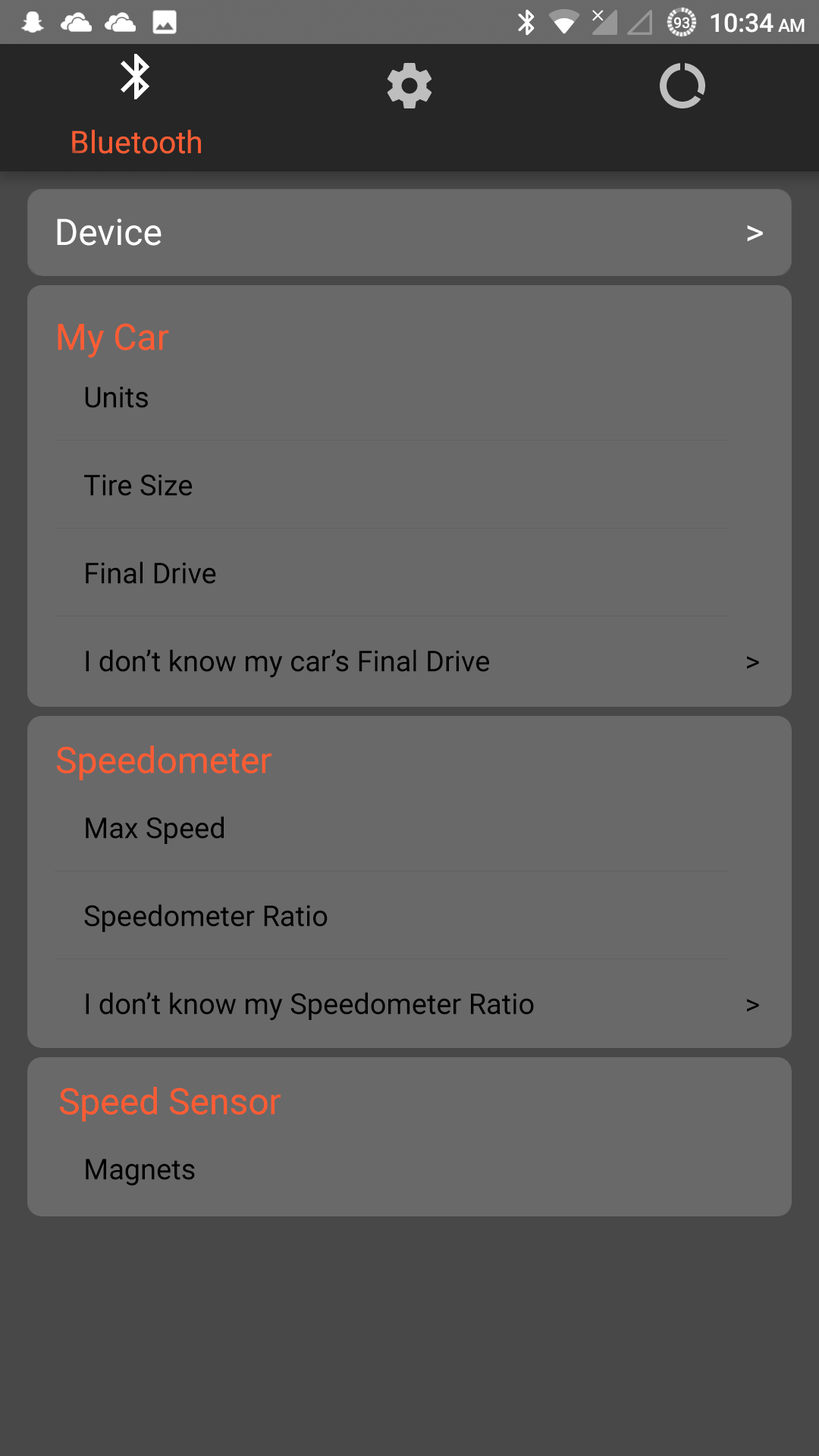
<style>
.page{position:relative;width:819px;height:1456px;background:#696969}
.page>*{position:absolute;margin:0}
.t1{font:36.4px "Roboto-Regular";color:#ffffff}
.t2{font:36.4px "Roboto-Regular";color:#ff5c33}
.t3{font:28.8px "Roboto-Regular";color:#000000}
</style>
<div class="page">
<p class="t1" style="left:57px;top:218px;width:105px;height:28px">Device</p>
<p class="t1" style="left:747px;top:225px;width:16px;height:17px">&gt;</p>
<p class="t2" style="left:58px;top:323px;width:111px;height:35px">My Car</p>
<p class="t3" style="left:85px;top:386px;width:63px;height:22px">Units</p>
<p class="t3" style="left:84px;top:474px;width:108px;height:22px">Tire Size</p>
<p class="t3" style="left:86px;top:561px;width:130px;height:23px">Final Drive</p>
<p class="t3" style="left:86px;top:649px;width:403px;height:29px">I don’t know my car’s Final Drive</p>
<p class="t3" style="left:747px;top:656px;width:12px;height:13px">&gt;</p>
<p class="t2" style="left:57px;top:745px;width:214px;height:35px">Speedometer</p>
<p class="t3" style="left:86px;top:816px;width:138px;height:28px">Max Speed</p>
<p class="t3" style="left:84px;top:904px;width:244px;height:28px">Speedometer Ratio</p>
<p class="t3" style="left:86px;top:992px;width:448px;height:29px">I don’t know my Speedometer Ratio</p>
<p class="t3" style="left:747px;top:999px;width:12px;height:13px">&gt;</p>
<p class="t2" style="left:60px;top:1087px;width:221px;height:35px">Speed Sensor</p>
<p class="t3" style="left:86px;top:1159px;width:109px;height:27px">Magnets</p>
</div>
